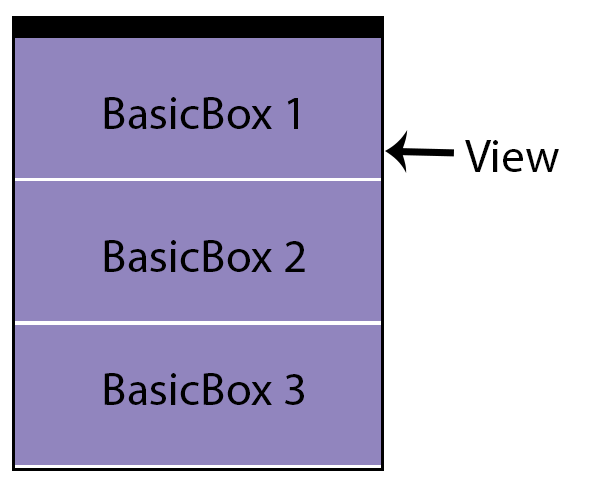
<style>
.page{position:relative;width:600px;height:488px;background:#9185be}
.page>*{position:absolute;margin:0}
.t1{font:47px "MyriadPro-Regular";color:#000000}
</style>
<div class="page">
<p class="t1" style="left:104px;top:97px;width:194px;height:32px">BasicBox 1</p>
<p class="t1" style="left:465px;top:140px;width:94px;height:32px">View</p>
<p class="t1" style="left:104px;top:240px;width:201px;height:32px">BasicBox 2</p>
<p class="t1" style="left:104px;top:373px;width:200px;height:32px">BasicBox 3</p>
</div>
